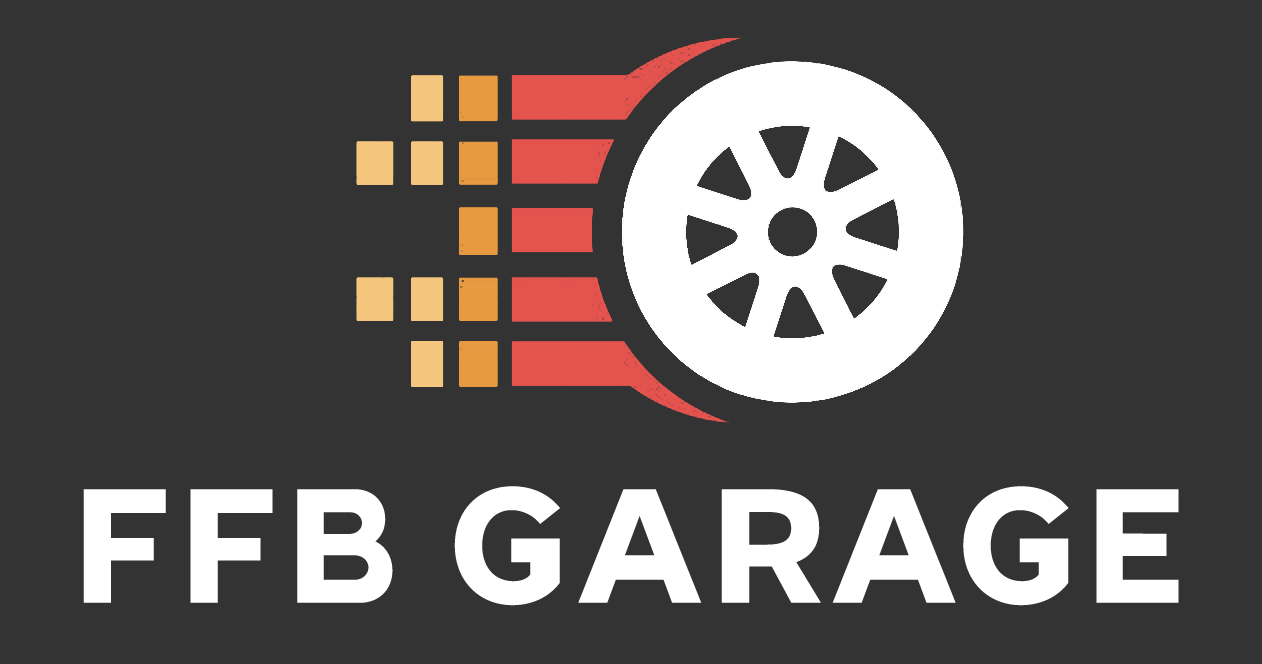
<style>
.page{position:relative;width:1262px;height:664px;background:#333333}
.page>*{position:absolute;margin:0}
.t1{font:176px "FONTSPRINGDEMO-HalcyonBoldRegular";color:#ffffff;text-transform:uppercase;scale:1.05 1}
</style>
<div class="page">
<p class="t1" style="left:83px;top:486px;width:1096px;height:120px">FFB GARAGE</p>
</div>
